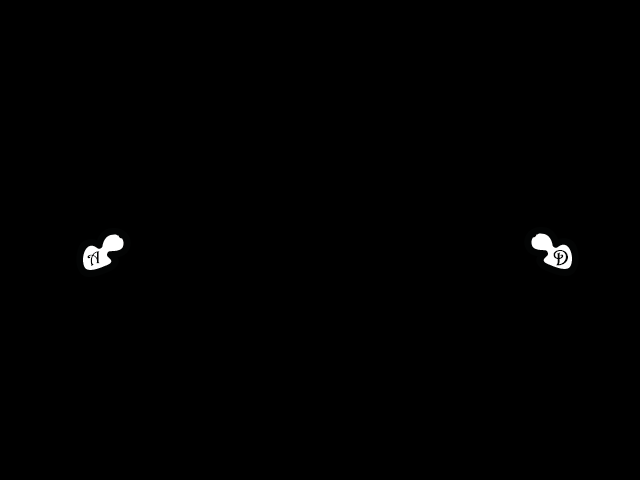
<style>
.page{position:relative;width:640px;height:480px;background:#000000}
.page>*{position:absolute;margin:0}
.t1{font:17.2px "Harrington";color:#030403;font-weight:bold}
.t2{font:21.5px "Harrington";color:#030403;font-weight:bold}
</style>
<div class="page">
<p class="t1" style="left:87px;top:251px;width:13px;height:15px">A</p>
<p class="t2" style="left:553px;top:250px;width:15px;height:16px">D</p>
</div>
